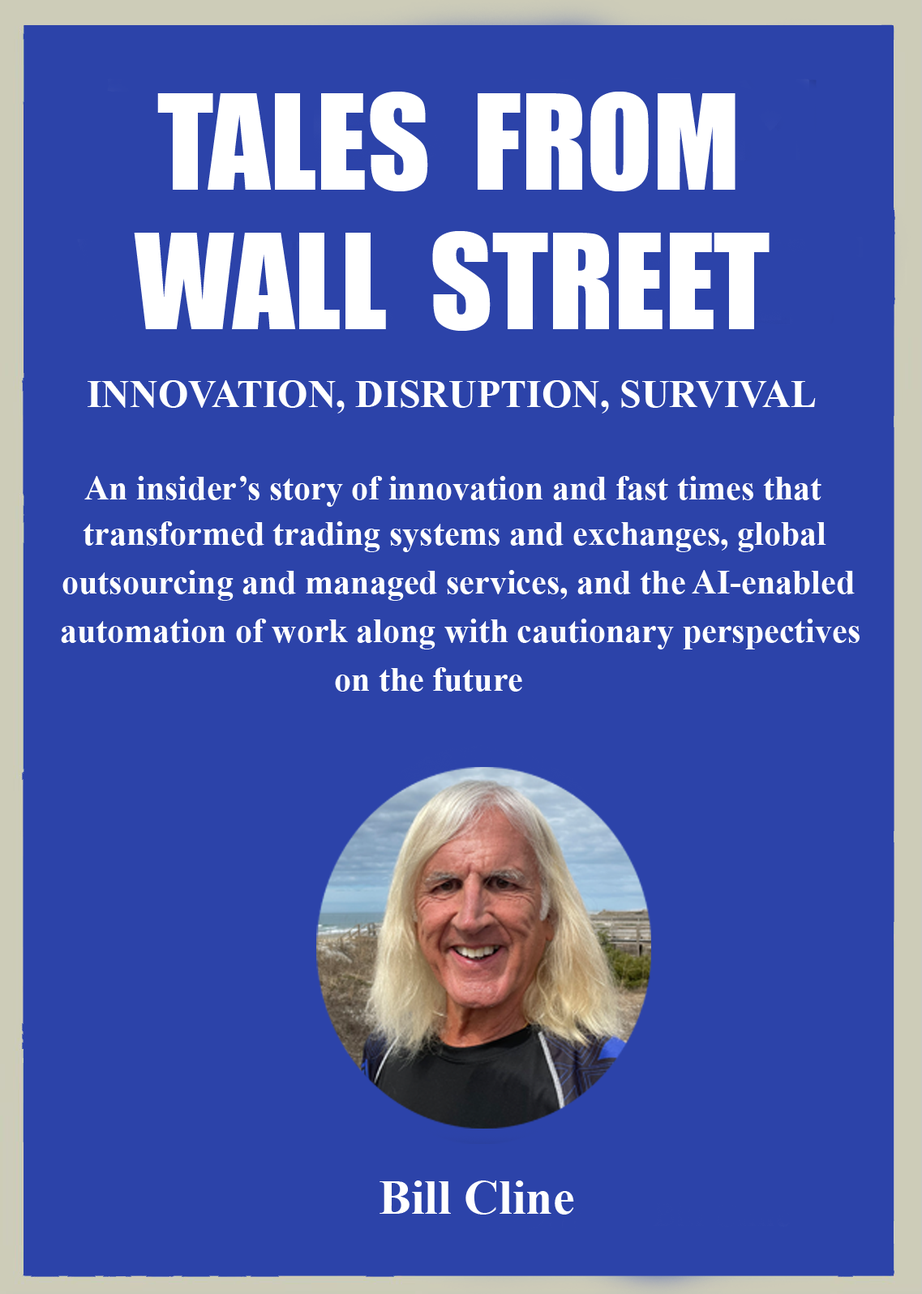
<style>
.page{position:relative;width:922px;height:1294px;background:#2c43a9}
.page>*{position:absolute;margin:0}
.t1{font:121.6px "Impact";color:#ffffff}
.t2{font:38.9px "TimesNewRomanPS-BoldMT";color:#ffffff}
.t3{font:34px "TimesNewRomanPS-BoldMT";color:#ffffff}
</style>
<div class="page">
<p class="t1" style="left:157px;top:92px;width:578px;height:99px">TALES  FROM</p>
<p class="t1" style="left:134px;top:231px;width:635px;height:100px">WALL  STREET</p>
<p class="t2" style="left:88px;top:380px;width:727px;height:33px">INNOVATION, DISRUPTION, SURVIVAL</p>
<p class="t3" style="left:84px;top:476px;width:737px;height:31px">An insider’s story of innovation and fast times that</p>
<p class="t3" style="left:83px;top:521px;width:743px;height:31px">transformed trading systems and exchanges, global</p>
<p class="t3" style="left:62px;top:570px;width:792px;height:31px">outsourcing and managed services, and the AI-enabled</p>
<p class="t3" style="left:61px;top:619px;width:798px;height:30px">automation of work along with cautionary perspectives</p>
<p class="t3" style="left:335px;top:667px;width:187px;height:24px">on the future</p>
</div>
